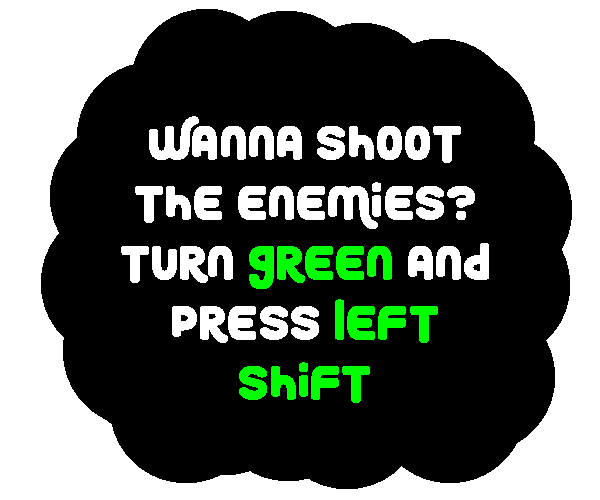
<style>
.page{position:relative;width:600px;height:500px;background:#000000}
.page>*{position:absolute;margin:0}
.t1{font:50px "RoundyRainbows";color:#ffffff}
.t2{font:50px "RoundyRainbows";color:#00ff00}
</style>
<div class="page">
<p class="t1" style="left:121px;top:116px;width:368px;height:287px;text-align:center">Wanna shoot the enemies? Turn <span class="t2">Green </span>and press <span class="t2">Left shift</span></p>
</div>
